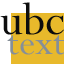
<style>
.page{position:relative;width:64px;height:64px;background:#e8b92b}
.page>*{position:absolute;margin:0}
.t1{font:50px "Perpetua";color:#0d0d0d}
.t2{font:40px "Perpetua";color:#868f98}
</style>
<div class="page">
<p class="t1" style="left:0px;top:2px;width:64px;height:33px">ubc</p>
<p class="t2" style="left:7px;top:35px;width:58px;height:20px">text</p>
</div>
